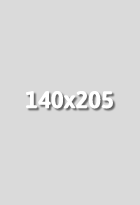
<style>
.page{position:relative;width:140px;height:205px;background:#dadada}
.page>*{position:absolute;margin:0}
.t1{font:24px "Asap-Bold";color:#ffffff}
</style>
<div class="page">
<p class="t1" style="left:26px;top:91px;width:87px;height:18px">140x205</p>
</div>
